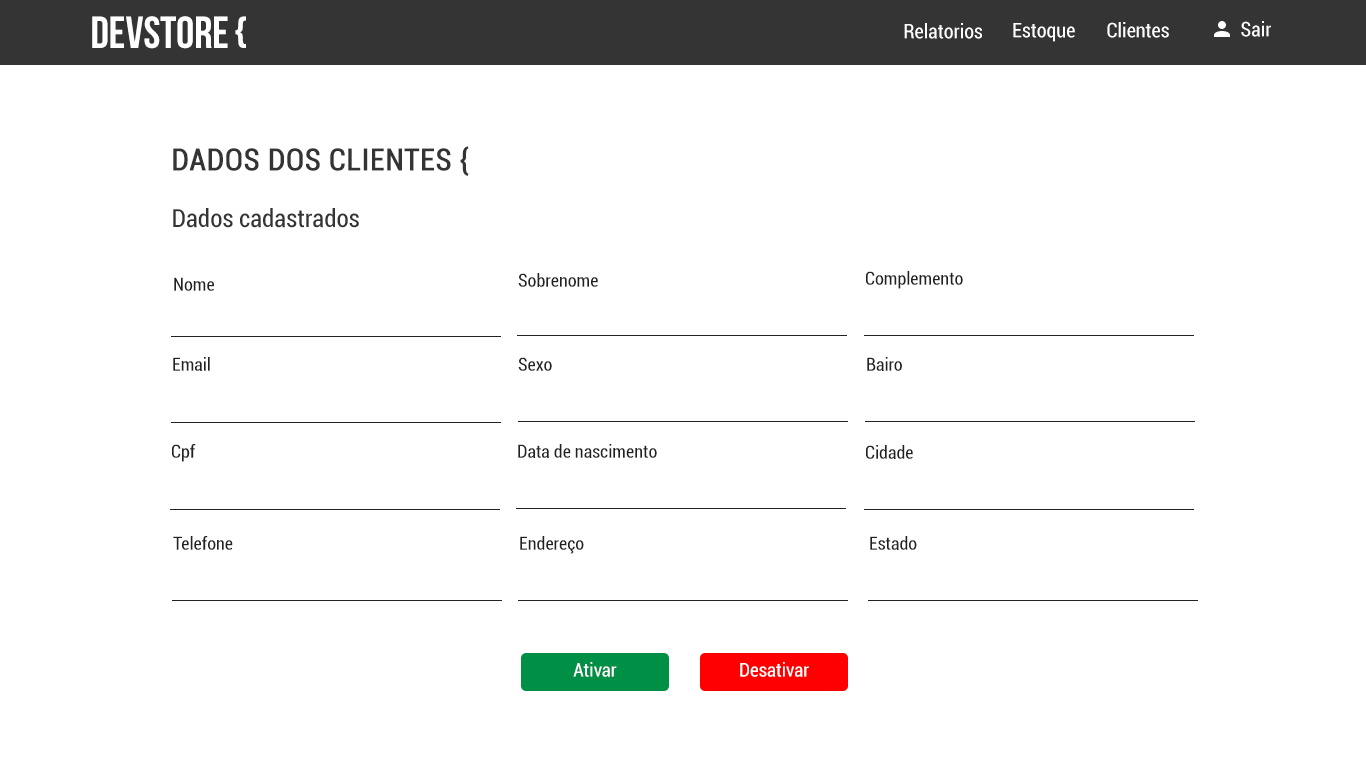
<style>
.page{position:relative;width:1366px;height:768px;background:#ffffff}
.page>*{position:absolute;margin:0}
.t1{font:45px "BebasNeue";color:#ffffff;text-transform:uppercase}
.t2{font:20px "Roboto-Condensed";color:#ffffff}
.t3{font:30px "Roboto-Condensed";color:#343434;font-weight:bold}
.t4{font:25px "Roboto-Condensed";color:#343434}
.t5{font:18px "Roboto-Condensed";color:#222222}
.t6{font:19px "Roboto-Condensed";color:#ffffff}
</style>
<div class="page">
<p class="t1" style="left:92px;top:16px;width:154px;height:33px">DEVSTORE {</p>
<p class="t2" style="left:904px;top:23px;width:78px;height:16px">Relatorios</p>
<p class="t2" style="left:1013px;top:23px;width:62px;height:19px">Estoque</p>
<p class="t2" style="left:1107px;top:22px;width:62px;height:16px">Clientes</p>
<p class="t2" style="left:1241px;top:21px;width:30px;height:16px">Sair</p>
<p class="t3" style="left:173px;top:146px;width:296px;height:30px">DADOS DOS CLIENTES {</p>
<p class="t4" style="left:173px;top:208px;width:186px;height:20px">Dados cadastrados</p>
<p class="t5" style="left:174px;top:277px;width:40px;height:14px">Nome</p>
<p class="t5" style="left:518px;top:273px;width:80px;height:14px">Sobrenome</p>
<p class="t5" style="left:866px;top:271px;width:97px;height:18px">Complemento</p>
<p class="t5" style="left:173px;top:357px;width:37px;height:14px">Email</p>
<p class="t5" style="left:518px;top:357px;width:34px;height:14px">Sexo</p>
<p class="t5" style="left:867px;top:357px;width:35px;height:14px">Bairo</p>
<p class="t5" style="left:172px;top:444px;width:24px;height:18px">Cpf</p>
<p class="t5" style="left:518px;top:444px;width:139px;height:14px">Data de nascimento</p>
<p class="t5" style="left:866px;top:445px;width:47px;height:14px">Cidade</p>
<p class="t5" style="left:173px;top:536px;width:60px;height:14px">Telefone</p>
<p class="t5" style="left:520px;top:536px;width:64px;height:18px">Endereço</p>
<p class="t5" style="left:870px;top:536px;width:47px;height:14px">Estado</p>
<p class="t6" style="left:573px;top:662px;width:44px;height:15px">Ativar</p>
<p class="t6" style="left:740px;top:662px;width:69px;height:15px">Desativar</p>
</div>
